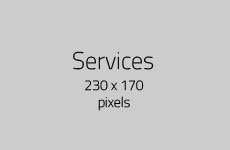
<style>
.page{position:relative;width:230px;height:150px;background:#cccccc}
.page>*{position:absolute;margin:0}
.t1{font:24px "TitilliumWeb-Thin";color:#000000}
.t2{font:14px "TitilliumWeb-Thin";color:#000000}
</style>
<div class="page">
<p class="t1" style="left:73px;top:51px;width:81px;height:19px">Services</p>
<p class="t2" style="left:85px;top:80px;width:59px;height:31px;text-align:center">230 x 170<br>pixels</p>
</div>
